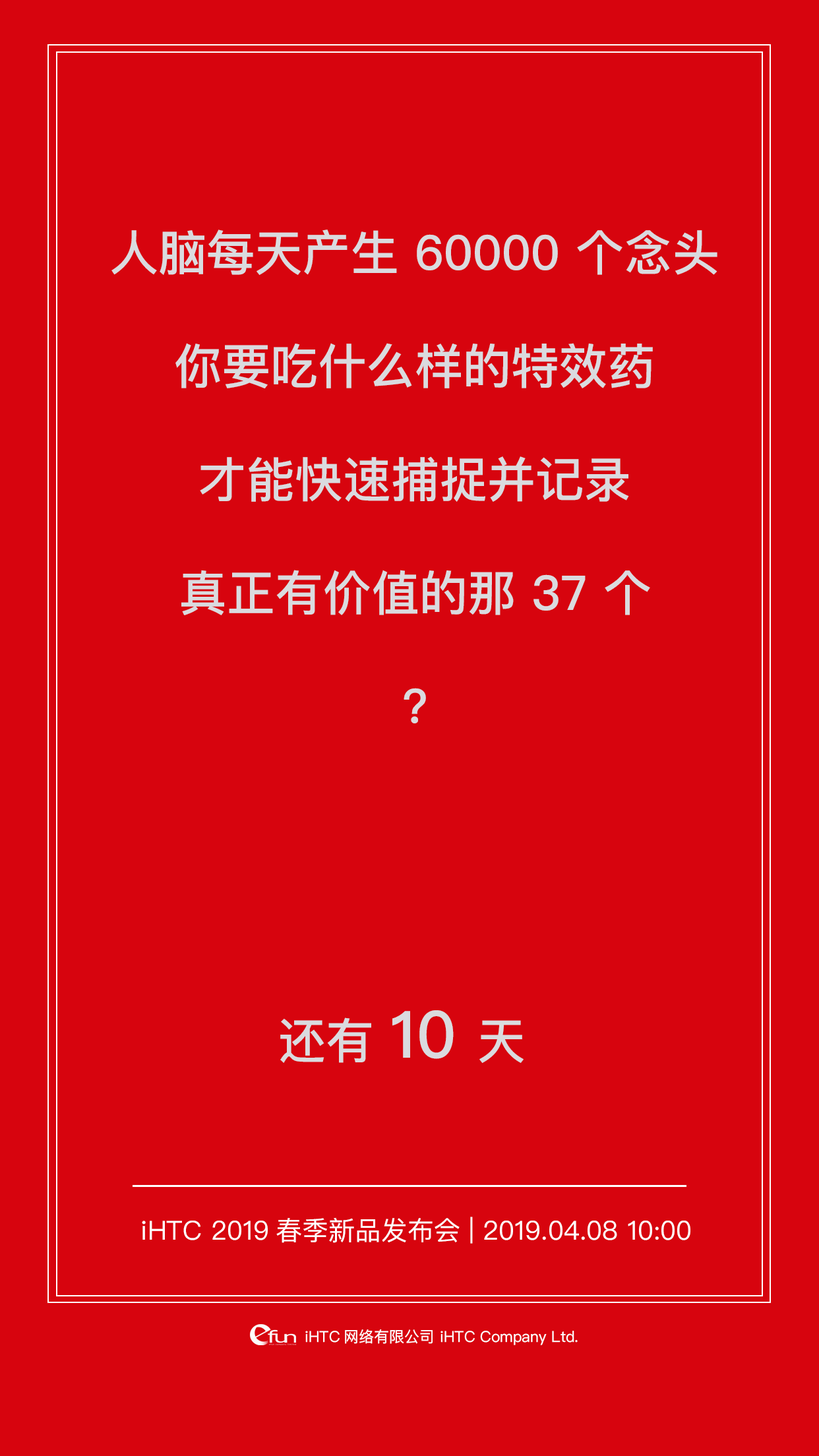
<style>
.page{position:relative;width:819px;height:1456px;background:#d7040e}
.page>*{position:absolute;margin:0}
.t1{font:48.1px/113.4px "PingFangSC-Medium";color:#dadbdf}
.t2{font:48.1px "PingFangSC-Medium";color:#dadbdf}
.t3{font:65.3px "PingFangSC-Medium";color:#dadbdf}
.t4{font:26.4px "PingFangSC-Regular";color:#ffffff}
.t5{font:15.2px "PingFangSC-Regular";color:#ffffff}
</style>
<div class="page">
<p class="t1" style="left:111px;top:229px;width:606px;height:494px;text-align:center">人脑每天产生 60000 个念头<br>你要吃什么样的特效药<br>才能快速捕捉并记录<br>真正有价值的那 37 个<br>?</p>
<p class="t2" style="left:280px;top:1010px;width:244px;height:53px">还有 <span class="t3">10 </span>天</p>
<p class="t4" style="left:142px;top:1217px;width:548px;height:27px">iHTC 2019春季新品发布会 | 2019.04.08 10:00</p>
<p class="t5" style="left:305px;top:1329px;width:273px;height:16px">iHTC网络有限公司 iHTC Company Ltd.</p>
</div>
